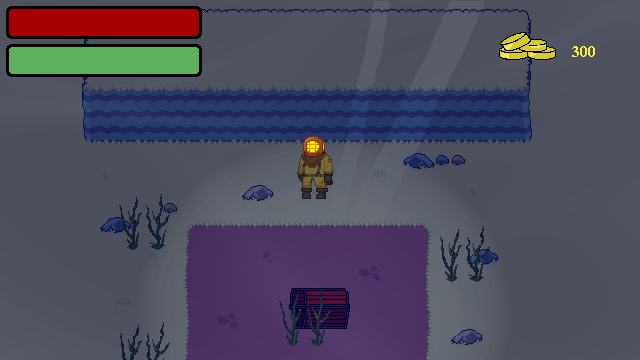
<style>
.page{position:relative;width:640px;height:360px}
.page>*{position:absolute;margin:0}
.t1{font:16px "TimesNewRomanPS-BoldMT";color:#fff142}
</style>
<div class="page">
<p class="t1" style="left:572px;top:46px;width:23px;height:11px">300</p>
</div>
